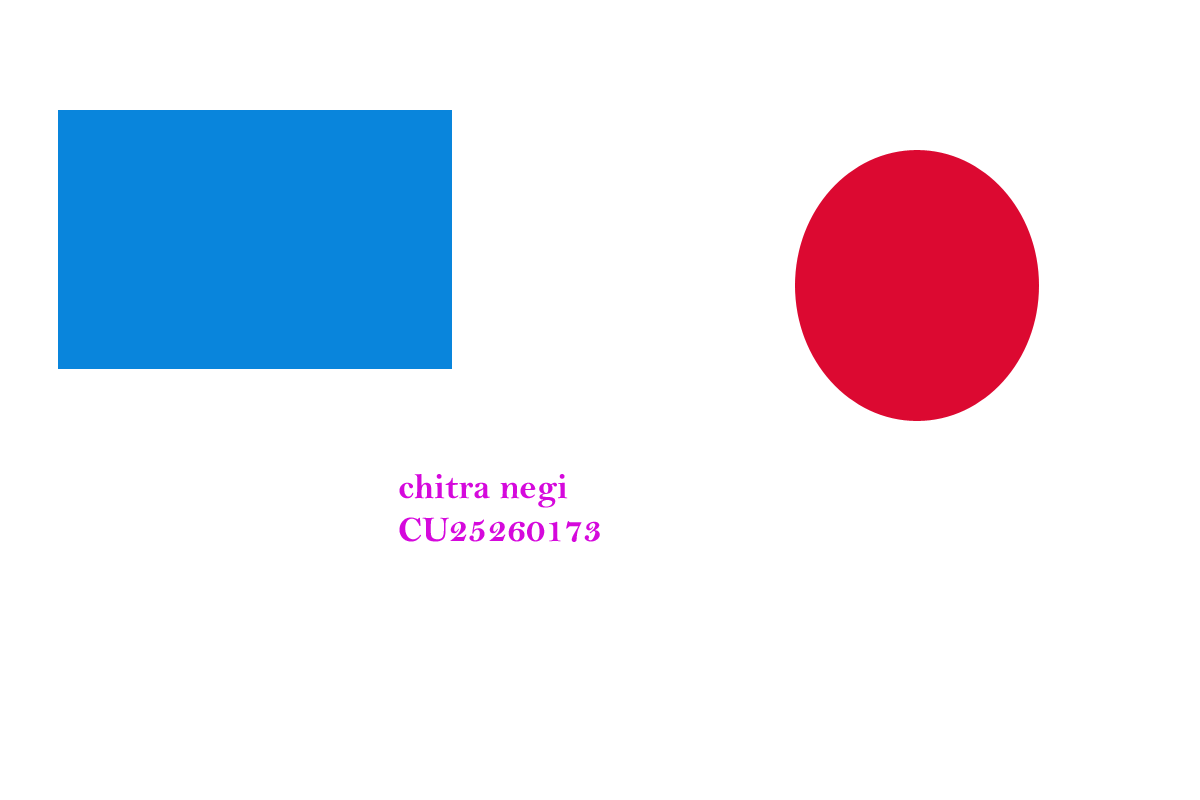
<style>
.page{position:relative;width:1200px;height:800px;background:#ffffff}
.page>*{position:absolute;margin:0}
.t1{font:36px "BellMTBold";color:#d509dc}
</style>
<div class="page">
<p class="t1" style="left:399px;top:474px;width:201px;height:68px">chitra negi<br>CU25260173</p>
</div>
